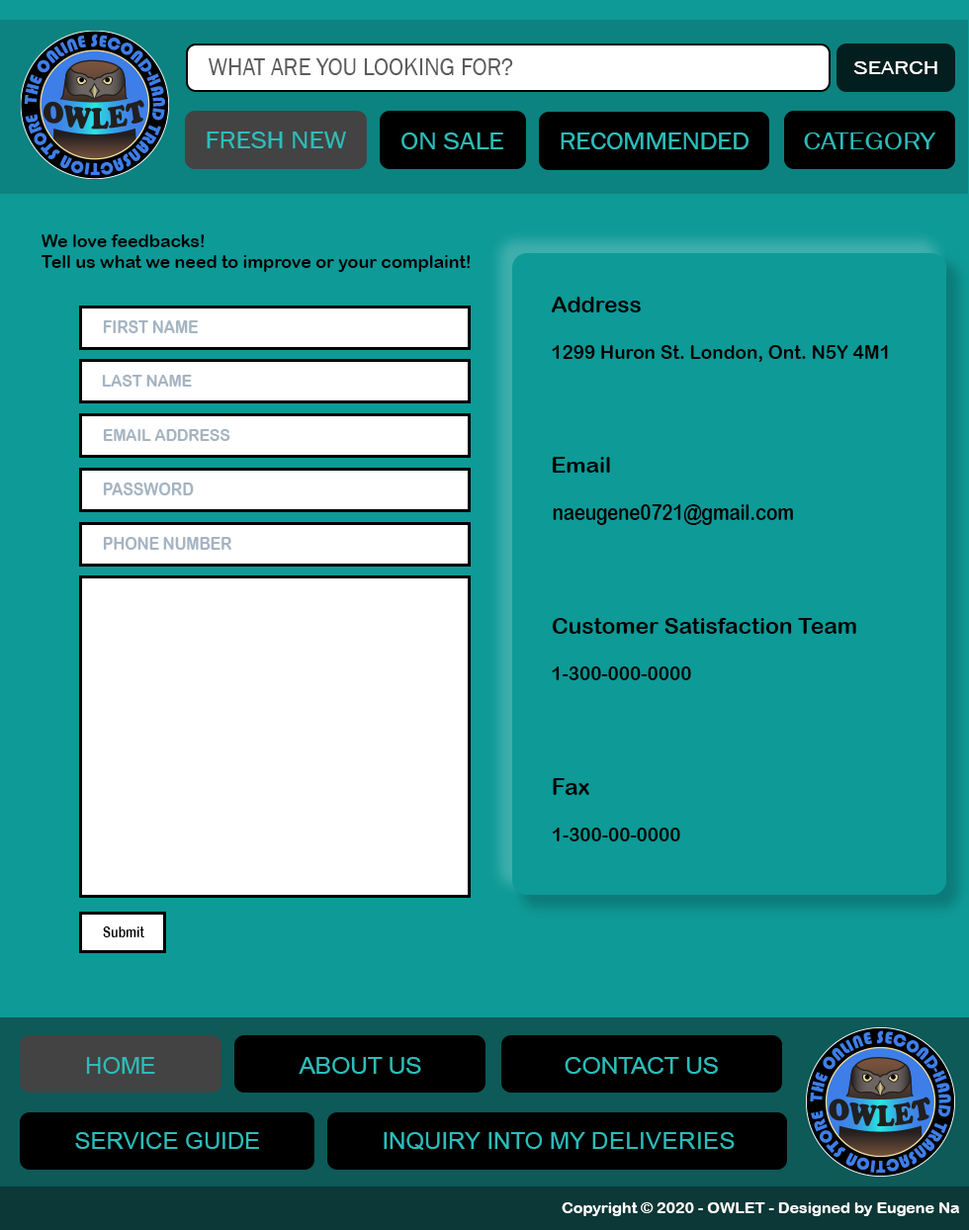
<style>
.page{position:relative;width:969px;height:1230px;background:#0e9a97}
.page>*{position:absolute;margin:0}
.t1{font:24.4px "FranklinGothic-Book";letter-spacing:-0.007em;color:#5b5b5b}
.t2{font:19.7px "FranklinGothic-Book";letter-spacing:-0.007em;color:#ffffff;scale:1.26 1}
.t3{font:24.8px "FranklinGothic-Book";letter-spacing:-0.007em;color:#2cbdb9;scale:1.12 1}
.t4{font:24.9px "FranklinGothic-Book";letter-spacing:-0.007em;color:#2cbdb9;scale:1.15 1}
.t5{font:24.6px "FranklinGothic-Book";letter-spacing:-0.007em;color:#2cbdb9;scale:1.11 1}
.t6{font:24.7px "FranklinGothic-Book";letter-spacing:-0.007em;color:#2cbdb9;scale:1.21 1}
.t7{font:17.9px "ArialRoundedMTBold";letter-spacing:-0.007em;color:#000000}
.t8{font:22.6px "ArialRoundedMTBold";letter-spacing:-0.007em;color:#000000}
.t9{font:17.4px "ArialRoundedMTBold";letter-spacing:-0.007em;color:#a5b4c1;scale:0.91 1}
.t10{font:18.6px "ArialRoundedMTBold";letter-spacing:-0.007em;color:#000000}
.t11{font:16.6px "ArialRoundedMTBold";letter-spacing:-0.007em;color:#a5b4c1;scale:0.95 1}
.t12{font:16.7px "ArialRoundedMTBold";letter-spacing:-0.007em;color:#a5b4c1;scale:0.93 1}
.t13{font:22.2px "ArialRoundedMTBold";letter-spacing:-0.007em;color:#000000}
.t14{font:17.5px "ArialRoundedMTBold";letter-spacing:-0.007em;color:#a5b4c1;scale:0.9 1}
.t15{font:22.3px "ArialRoundedMTBold";letter-spacing:-0.007em;color:#000000;scale:0.83 1}
.t16{font:18.3px "ArialRoundedMTBold";letter-spacing:-0.007em;color:#a5b4c1;scale:0.85 1}
.t17{font:23.1px "ArialRoundedMTBold";letter-spacing:-0.007em;color:#000000}
.t18{font:18.9px "ArialRoundedMTBold";letter-spacing:-0.007em;color:#000000}
.t19{font:24px "ArialRoundedMTBold";letter-spacing:-0.007em;color:#000000;scale:0.95 1}
.t20{font:14.9px "ArialRoundedMTBold";letter-spacing:-0.007em;color:#000000;scale:0.83 1}
.t21{font:23.8px "ArialMT";letter-spacing:-0.007em;color:#2cbdb9}
.t22{font:23.8px "ArialMT";color:#2cbdb9}
.t23{font:23.8px "ArialMT";letter-spacing:0.01em;color:#2cbdb9}
.t24{font:15.9px "ArialRoundedMTBold";letter-spacing:-0.007em;color:#ffffff}
</style>
<div class="page">
<p class="t1" style="left:209px;top:58px;width:304px;height:17px">WHAT ARE YOU LOOKING FOR?</p>
<p class="t2" style="left:854px;top:61px;width:84px;height:14px">SEARCH</p>
<p class="t3" style="left:207px;top:132px;width:139px;height:16px">FRESH NEW</p>
<p class="t4" style="left:402px;top:133px;width:101px;height:16px">ON SALE</p>
<p class="t5" style="left:561px;top:133px;width:189px;height:16px">RECOMMENDED</p>
<p class="t6" style="left:804px;top:133px;width:132px;height:16px">CATEGORY</p>
<p class="t7" style="left:41px;top:234px;width:430px;height:38px">We love feedbacks!<br>Tell us what we need to improve or your complaint!</p>
<p class="t8" style="left:551px;top:297px;width:90px;height:16px">Address</p>
<p class="t9" style="left:103px;top:320px;width:96px;height:13px">FIRST NAME</p>
<p class="t10" style="left:552px;top:345px;width:336px;height:17px">1299 Huron St. London, Ont. N5Y 4M1</p>
<p class="t11" style="left:102px;top:375px;width:90px;height:12px">LAST NAME</p>
<p class="t12" style="left:103px;top:429px;width:127px;height:12px">EMAIL ADDRESS</p>
<p class="t13" style="left:553px;top:457px;width:57px;height:16px">Email</p>
<p class="t14" style="left:103px;top:483px;width:91px;height:12px">PASSWORD</p>
<p class="t15" style="left:553px;top:504px;width:240px;height:21px">naeugene0721@gmail.com</p>
<p class="t16" style="left:103px;top:537px;width:128px;height:13px">PHONE NUMBER</p>
<p class="t17" style="left:552px;top:618px;width:304px;height:16px">Customer Satisfaction Team</p>
<p class="t18" style="left:552px;top:667px;width:139px;height:13px">1-300-000-0000</p>
<p class="t19" style="left:553px;top:778px;width:36px;height:17px">Fax</p>
<p class="t18" style="left:553px;top:828px;width:127px;height:14px">1-300-00-0000</p>
<p class="t20" style="left:103px;top:927px;width:41px;height:11px">Submit</p>
<p class="t21" style="left:86px;top:1057px;width:69px;height:17px">HOME</p>
<p class="t21" style="left:299px;top:1057px;width:122px;height:17px">ABOUT US</p>
<p class="t21" style="left:565px;top:1057px;width:153px;height:17px">CONTACT US</p>
<p class="t21" style="left:75px;top:1132px;width:184px;height:17px">SERVICE GUIDE</p>
<p class="t21" style="left:384px;top:1132px;width:351px;height:18px">INQUIRY INTO MY <span class="t22">D</span><span class="t23">ELIVERIES</span></p>
<p class="t24" style="left:562px;top:1203px;width:397px;height:13px">Copyright © 2020 - OWLET - Designed by Eugene Na</p>
</div>
